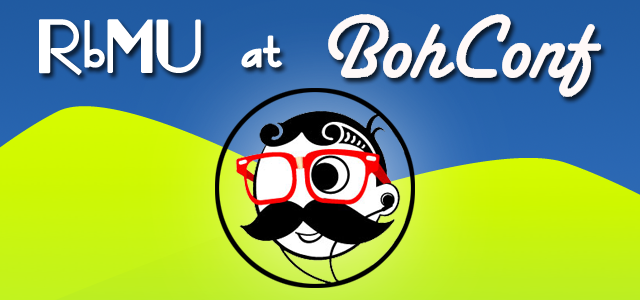
<style>
.page{position:relative;width:640px;height:300px}
.page>*{position:absolute;margin:0}
.t1{font:72px "FashionVictim";color:#ffffff;font-weight:bold}
</style>
<div class="page">
<p class="t1" style="left:39px;top:19px;width:244px;height:57px">RbMU at</p>
</div>
